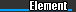
<style>
.page{position:relative;width:76px;height:12px;background:#333333}
.page>*{position:absolute;margin:0}
.t1{font:11px "Impact";color:#ffffff}
</style>
<div class="page">
<p class="t1" style="left:30px;top:1px;width:37px;height:9px">Element</p>
</div>
